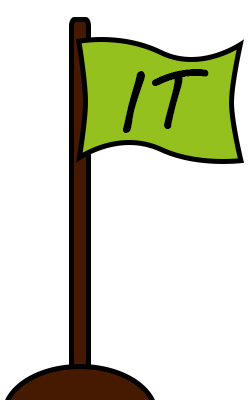
<style>
.page{position:relative;width:250px;height:400px;background:#ffffff}
.page>*{position:absolute;margin:0}
.t1{font:83.6px "MVBoli";color:#000000}
</style>
<div class="page">
<p class="t1" style="left:122px;top:69px;width:87px;height:64px">IT</p>
</div>
